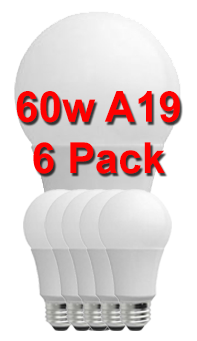
<style>
.page{position:relative;width:197px;height:341px;background:#ffffff}
.page>*{position:absolute;margin:0}
.t1{font:42.7px "Arial-BoldMT";color:#fe0000}
</style>
<div class="page">
<p class="t1" style="left:16px;top:91px;width:164px;height:83px;text-align:center">60w A19<br>6 Pack</p>
</div>
